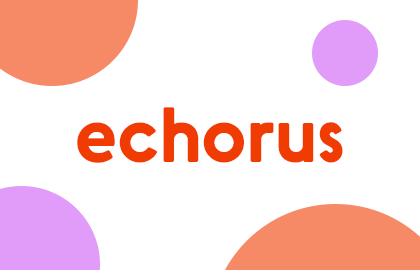
<style>
.page{position:relative;width:420px;height:270px;background:#ffffff}
.page>*{position:absolute;margin:0}
.t1{font:78px "Nanami-Rounded-Med";color:#f03c02}
</style>
<div class="page">
<p class="t1" style="left:77px;top:107px;width:266px;height:56px">echorus</p>
</div>
